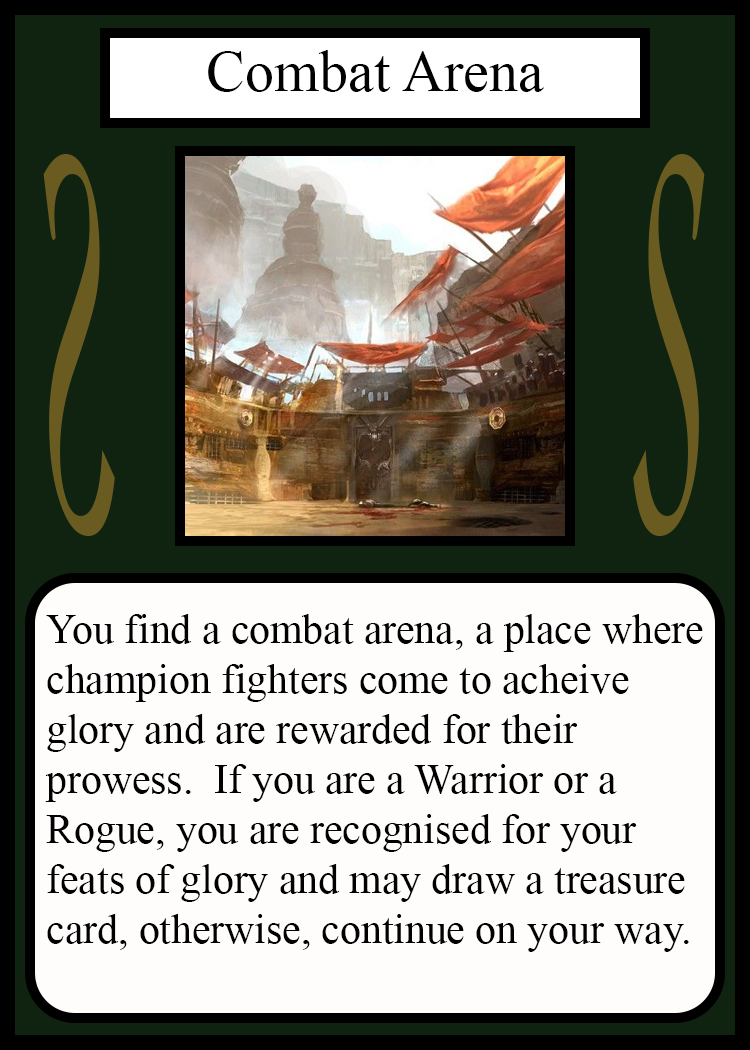
<style>
.page{position:relative;width:750px;height:1050px;background:#fffcfc}
.page>*{position:absolute;margin:0}
.t1{font:58.3px "TimesNewRomanPSMT";color:#010101}
.t2{font:548.5px "Apple-Chancery";color:#6a5c21;scale:0.27 1}
.t3{font:548.2px "Apple-Chancery";color:#6a5c21;scale:0.27 1}
.t4{font:41.7px "TimesNewRomanPSMT";color:#000000}
</style>
<div class="page">
<p class="t1" style="left:208px;top:50px;width:336px;height:42px">Combat Arena</p>
<p class="t2" style="left:43px;top:154px;width:72px;height:382px;rotate:180deg">S</p>
<p class="t3" style="left:633px;top:154px;width:72px;height:382px">S</p>
<p class="t4" style="left:45px;top:614px;width:658px;height:338px">You find a combat arena, a place where<br>champion fighters come to acheive<br>glory and are rewarded for their<br>prowess.  If you are a Warrior or a<br>Rogue, you are recognised for your <br>feats of glory and may draw a treasure <br>card, otherwise, continue on your way.</p>
</div>
